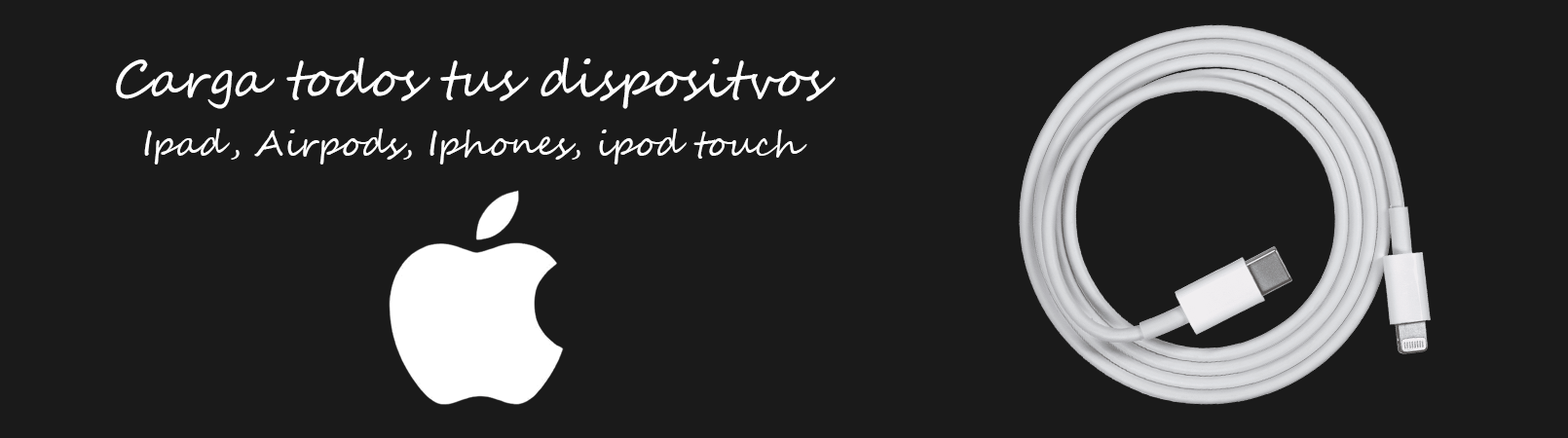
<style>
.page{position:relative;width:1568px;height:438px;background:#1a1a1a}
.page>*{position:absolute;margin:0}
.t1{font:50.5px "SegoeScript";color:#fefefe}
.t2{font:35.1px "SegoeScript";color:#fefefe}
</style>
<div class="page">
<p class="t1" style="left:116px;top:57px;width:720px;height:52px">Carga todos tus dispositvos</p>
<p class="t2" style="left:144px;top:129px;width:663px;height:36px">Ipad, Airpods, Iphones, ipod touch</p>
</div>
